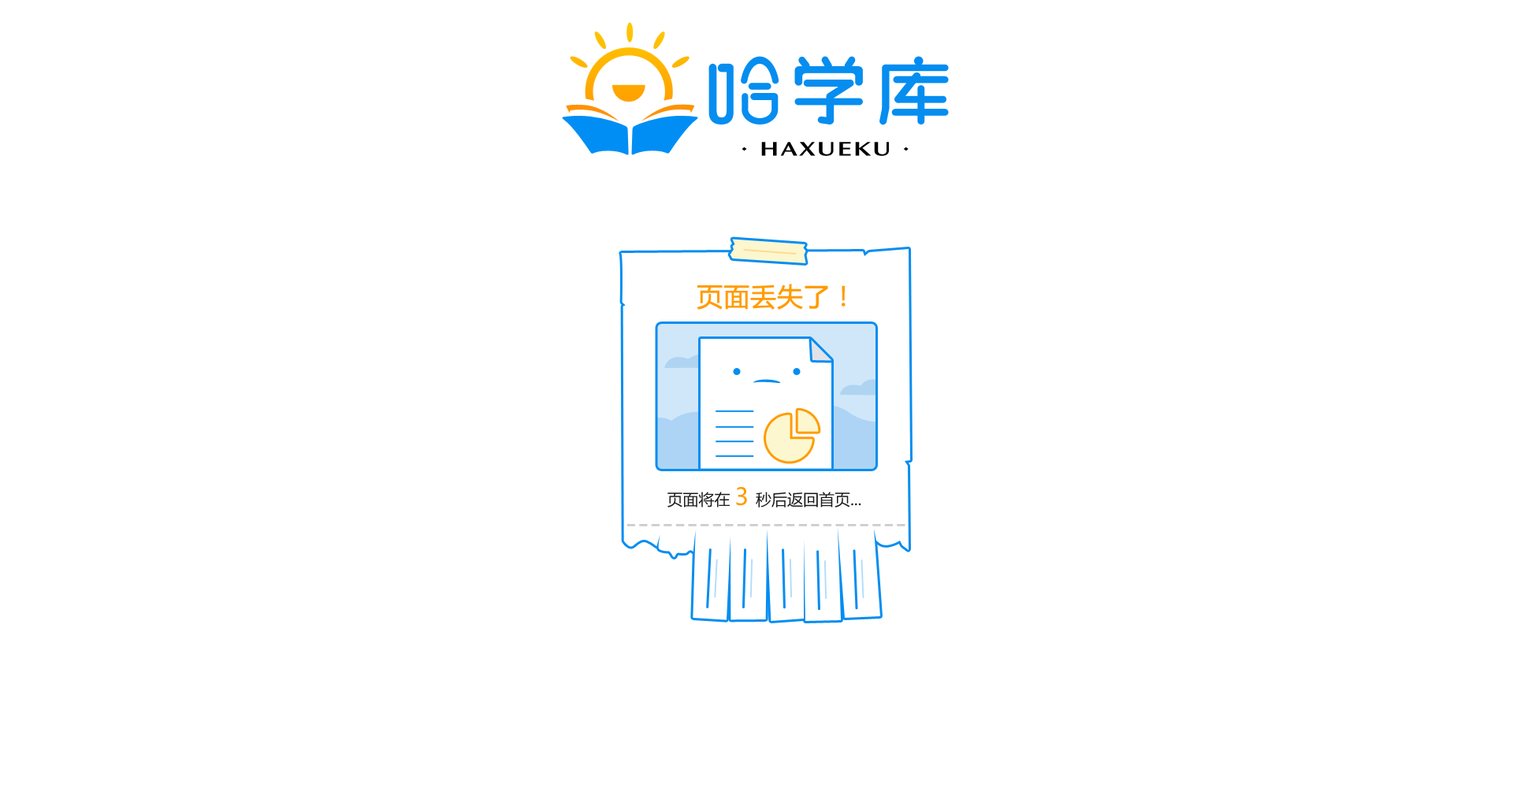
<style>
.page{position:relative;width:1513px;height:788px;background:#ffffff}
.page>*{position:absolute;margin:0}
.t1{font:20.5px "OceanSansStd-SemiboldExt";letter-spacing:0.075em;color:#000000;scale:1.2 1}
.t2{font:26px "MicrosoftYaHei";color:#ff9c00;font-weight:bold}
.t3{font:15.8px "MicrosoftYaHei";color:#1a1a1a}
.t4{font:23.6px "MicrosoftYaHei";color:#ff9c00}
.t5{font:28.4px "MicrosoftYaHei";color:#cccccc}
</style>
<div class="page">
<p class="t1" style="left:742px;top:142px;width:167px;height:14px">· HAXUEKU ·</p>
<p class="t2" style="left:697px;top:284px;width:149px;height:26px">页面丢失了！</p>
<p class="t3" style="left:667px;top:487px;width:194px;height:21px">页面将在 <span class="t4">3 </span>秒后返回首页...</p>
<p class="t5" style="left:627px;top:524px;width:278px;height:2px">-----------------------</p>
</div>
